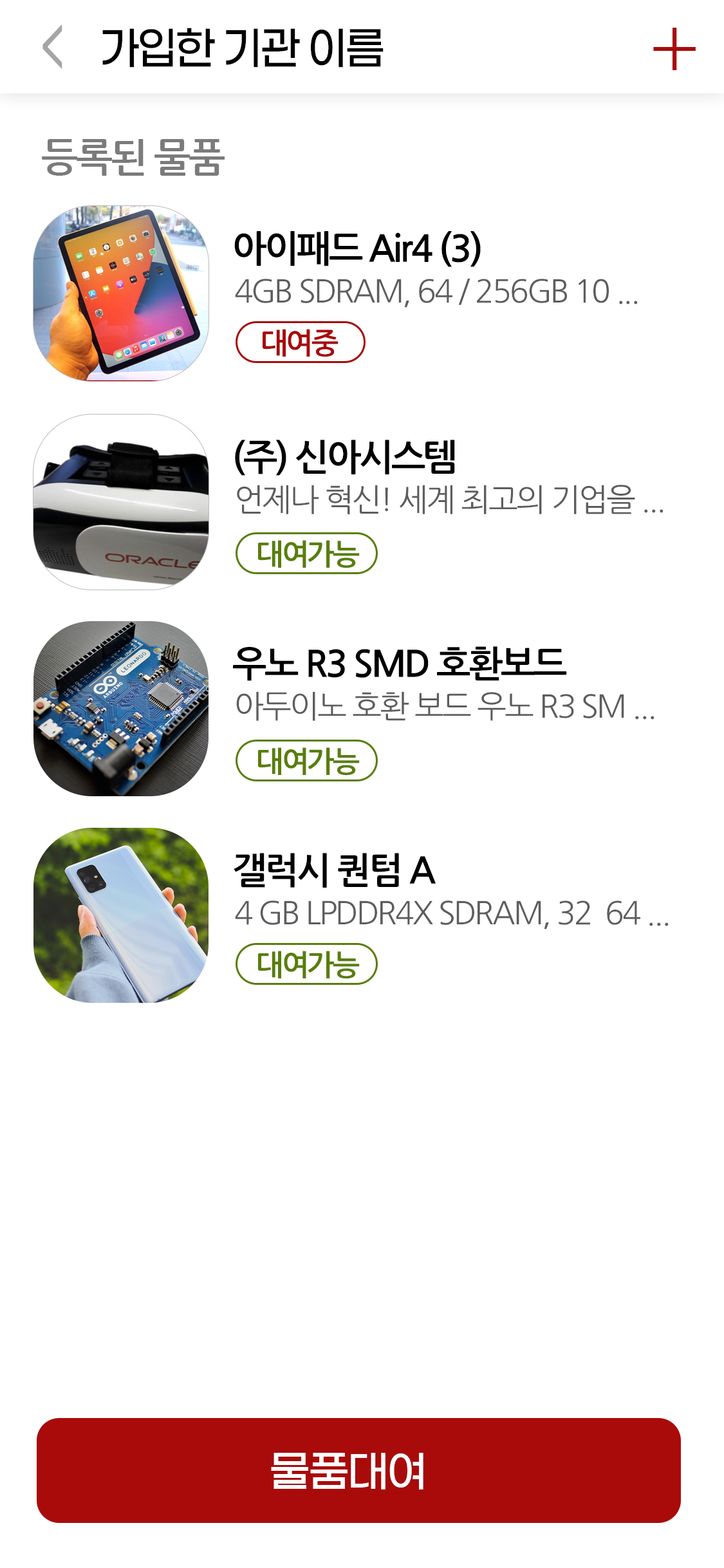
<style>
.page{position:relative;width:724px;height:1568px;background:#ffffff}
.page>*{position:absolute;margin:0}
.t1{font:45.2px "NanumGothicBold";letter-spacing:0.08em;color:#a6a6a6}
.t2{font:45.1px "GmarketSansTTFMedium";letter-spacing:-0.06em;color:#000000;scale:0.93 1}
.t3{font:95.4px "GmarketSansTTFLight";letter-spacing:-0.06em;color:#a90b0b}
.t4{font:39.3px "NanumGothicBold";letter-spacing:-0.06em;color:#7b7b7b}
.t5{font:36.5px "NanumGothicBold";letter-spacing:-0.06em;color:#000000}
.t6{font:31.5px "NanumGothic";letter-spacing:-0.06em;color:#5d5d5d}
.t7{font:29px "NanumGothicBold";letter-spacing:-0.06em;color:#a90b0b}
.t8{font:36.4px "NanumGothicBold";letter-spacing:-0.06em;color:#000000}
.t9{font:29px "NanumGothicBold";letter-spacing:-0.06em;color:#597e09}
.t10{font:43.4px "GmarketSansTTFMedium";letter-spacing:-0.06em;color:#ffffff}
</style>
<div class="page">
<p class="t1" style="left:42px;top:24px;width:20px;height:45px;rotate:180deg">&gt;</p>
<p class="t2" style="left:102px;top:28px;width:282px;height:40px">가입한 기관 이름</p>
<p class="t3" style="left:653px;top:28px;width:43px;height:42px">+</p>
<p class="t4" style="left:42px;top:139px;width:183px;height:37px">등록된 물품</p>
<p class="t5" style="left:234px;top:231px;width:247px;height:36px">아이패드 Air4 (3)</p>
<p class="t6" style="left:235px;top:278px;width:403px;height:30px">4GB SDRAM, 64 / 256GB 10 ...</p>
<p class="t7" style="left:263px;top:329px;width:76px;height:28px">대여중</p>
<p class="t8" style="left:235px;top:440px;width:220px;height:36px">(주) 신아시스템</p>
<p class="t6" style="left:237px;top:485px;width:427px;height:29px">언제나 혁신! 세계 최고의 기업을 ...</p>
<p class="t9" style="left:258px;top:540px;width:102px;height:28px">대여가능</p>
<p class="t8" style="left:233px;top:646px;width:334px;height:35px">우노 R3 SMD 호환보드</p>
<p class="t6" style="left:236px;top:691px;width:419px;height:30px">아두이노 호환 보드 우노 R3 SM ...</p>
<p class="t9" style="left:258px;top:747px;width:102px;height:29px">대여가능</p>
<p class="t8" style="left:234px;top:853px;width:202px;height:35px">갤럭시 퀀텀 A</p>
<p class="t6" style="left:235px;top:901px;width:434px;height:28px">4 GB LPDDR4X SDRAM, 32  64 ...</p>
<p class="t9" style="left:258px;top:951px;width:102px;height:28px">대여가능</p>
<p class="t10" style="left:271px;top:1453px;width:153px;height:36px">물품대여</p>
</div>
